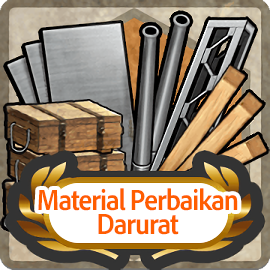
<style>
.page{position:relative;width:270px;height:270px}
.page>*{position:absolute;margin:0}
.t1{font:30px/24px "AdobeClean-Bold";letter-spacing:-0.04em;color:#ff5d00;scale:0.9 1}
</style>
<div class="page">
<p class="t1" style="left:38px;top:188px;width:200px;height:47px;text-align:center">Material Perbaikan<br>Darurat</p>
</div>
